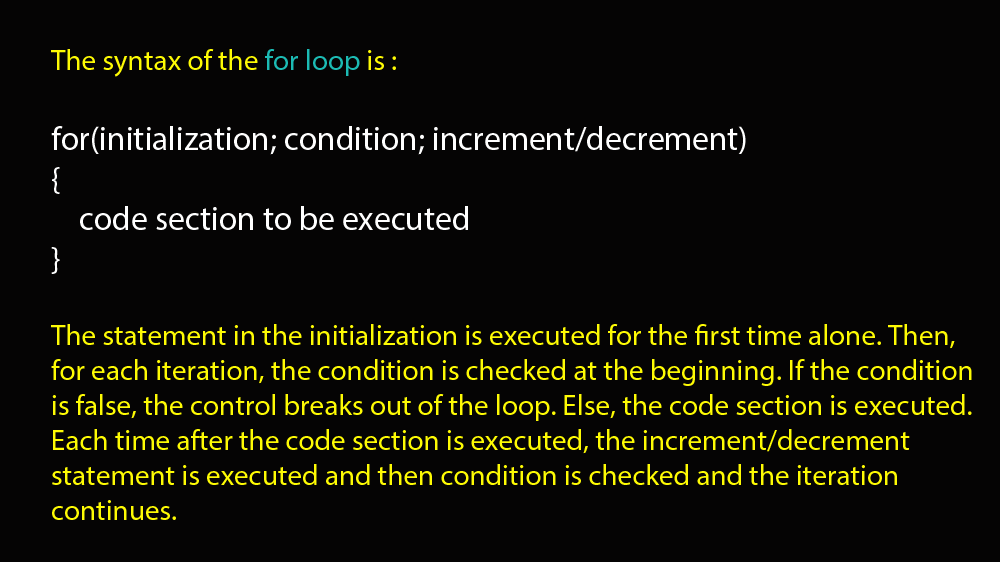
<style>
.page{position:relative;width:1000px;height:562px;background:#050404}
.page>*{position:absolute;margin:0}
.t1{font:29.2px "MyriadPro-Regular";color:#fefb04}
.t2{font:29.2px "MyriadPro-Regular";color:#1cbbb4}
.t3{font:33.3px "MyriadPro-Regular";color:#ffffff}
</style>
<div class="page">
<p class="t1" style="left:51px;top:49px;width:921px;height:471px">The syntax of the <span class="t2">for loop</span> is :<br><br><span class="t3">for(initialization; condition; increment/decrement)<br>{<br>    code section to be executed<br>}<br><br></span>The statement in the initialization is executed for the first time alone. Then, for each iteration, the condition is checked at the beginning. If the condition is false, the control breaks out of the loop. Else, the code section is executed. Each time after the code section is executed, the increment/decrement statement is executed and then condition is checked and the iteration continues.</p>
</div>
